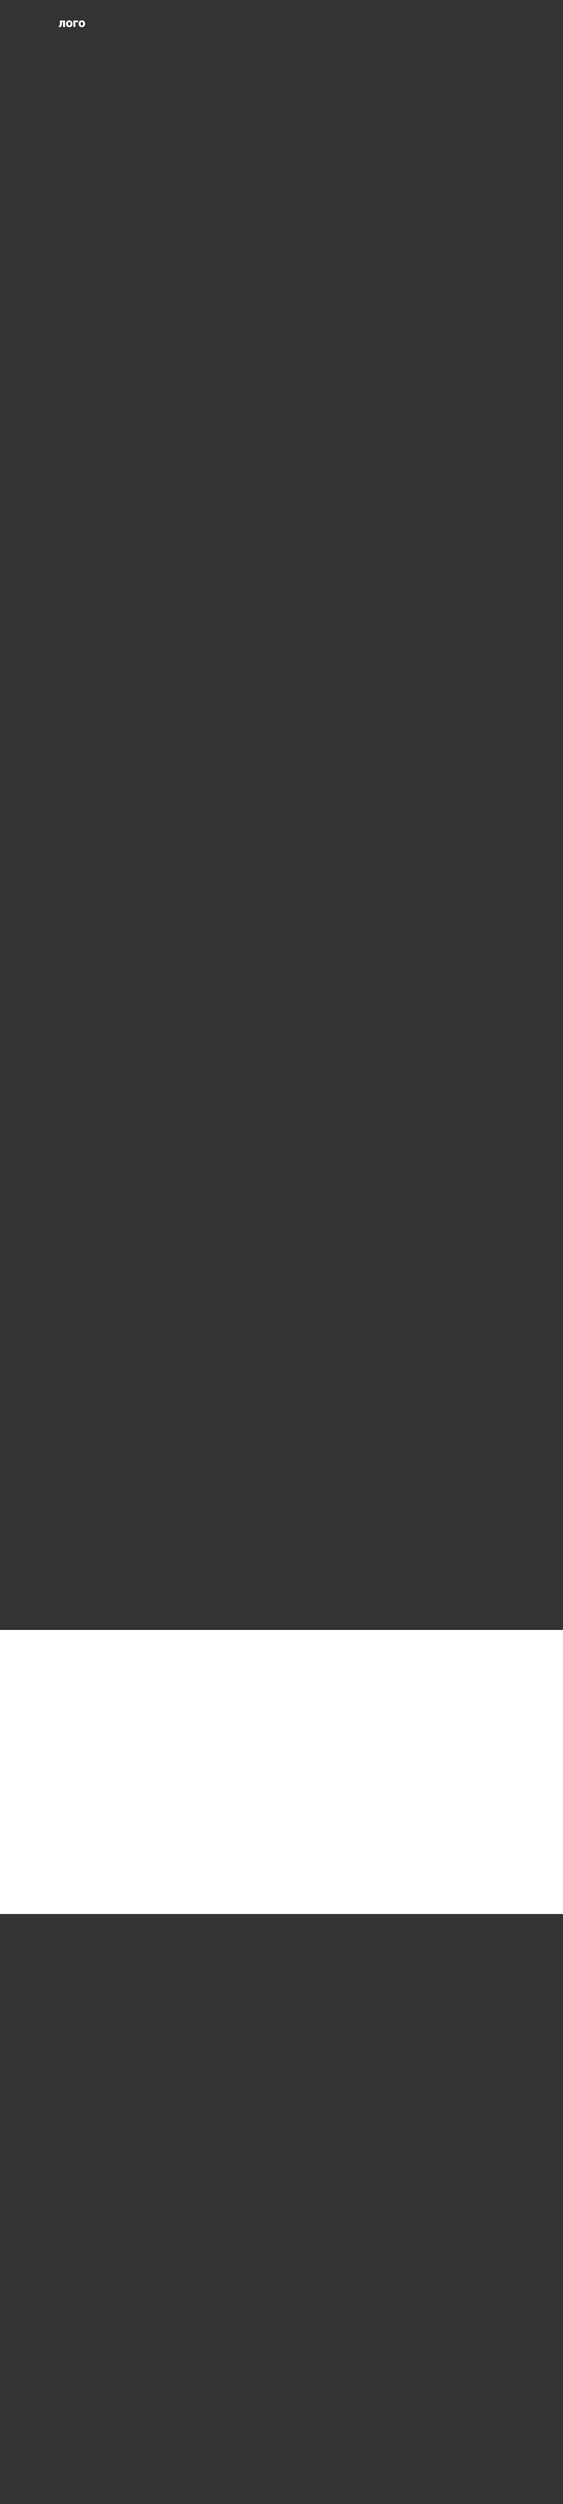
<style>
.page{position:relative;width:563px;height:2504px;background:#333333}
.page>*{position:absolute;margin:0}
.t1{font:9px "HelveticaNeueCyr-Black";color:#ffffff;text-transform:uppercase}
</style>
<div class="page">
<p class="t1" style="left:59px;top:20px;width:26px;height:7px">Лого</p>
</div>
